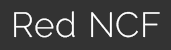
<style>
.page{position:relative;width:171px;height:50px;background:#333333}
.page>*{position:absolute;margin:0}
.t1{font:35px "Raleway-Light";letter-spacing:0.025em;color:#ffffff}
</style>
<div class="page">
<p class="t1" style="left:14px;top:11px;width:146px;height:27px">Red NCF</p>
</div>
